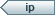
<style>
.page{position:relative;width:55px;height:15px}
.page>*{position:absolute;margin:0}
.t1{font:11px "ReznorBroken";color:#24404b}
</style>
<div class="page">
<p class="t1" style="left:26px;top:3px;width:9px;height:10px">ip</p>
</div>
